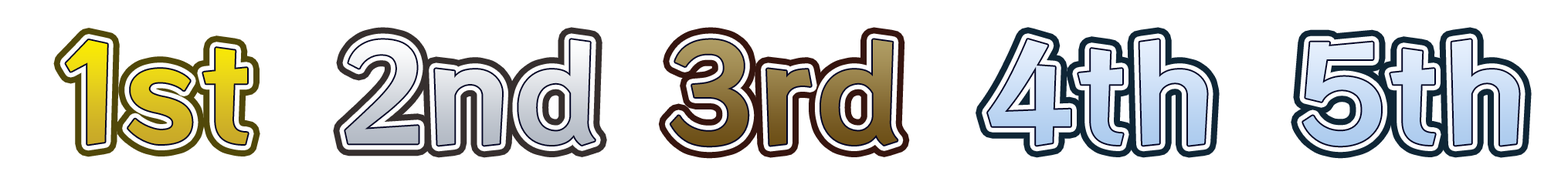
<style>
.page{position:relative;width:1568px;height:185px;background:#ffffff}
.page>*{position:absolute;margin:0}
.t1{font:128.7px "RocknRollOne-Regular";font-weight:bold}
.t2{font:128.7px "RocknRollOne-Regular";color:#c7dcf5;font-weight:bold}
</style>
<div class="page">
<p class="t1" style="left:66px;top:40px;width:182px;height:105px">1st</p>
<p class="t1" style="left:670px;top:39px;width:228px;height:108px">3rd</p>
<p class="t2" style="left:988px;top:39px;width:219px;height:107px">4th</p>
<p class="t1" style="left:1303px;top:39px;width:216px;height:108px">5th</p>
</div>
